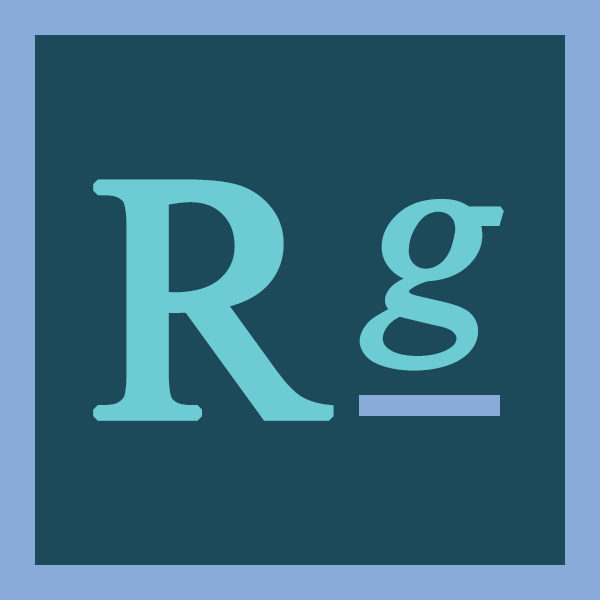
<style>
.page{position:relative;width:600px;height:600px;background:#1c4a5a}
.page>*{position:absolute;margin:0}
.t1{font:350px "TimesNewRomanPSMT";color:#6ccbd3;font-weight:bold}
.t2{font:250px "TimesNewRomanPS-ItalicMT";color:#6ccbd3;font-weight:bold}
</style>
<div class="page">
<p class="t1" style="left:93px;top:179px;width:241px;height:242px">R</p>
<p class="t2" style="left:359px;top:199px;width:145px;height:172px">g</p>
</div>
